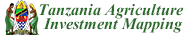
<style>
.page{position:relative;width:185px;height:35px;background:#ffffff}
.page>*{position:absolute;margin:0}
.t1{font:21px "Kokila-BoldItalic";color:#286a27}
</style>
<div class="page">
<p class="t1" style="left:39px;top:4px;width:145px;height:15px">Tanzania Agriculture</p>
<p class="t1" style="left:43px;top:18px;width:140px;height:15px">Investment Mapping</p>
</div>
